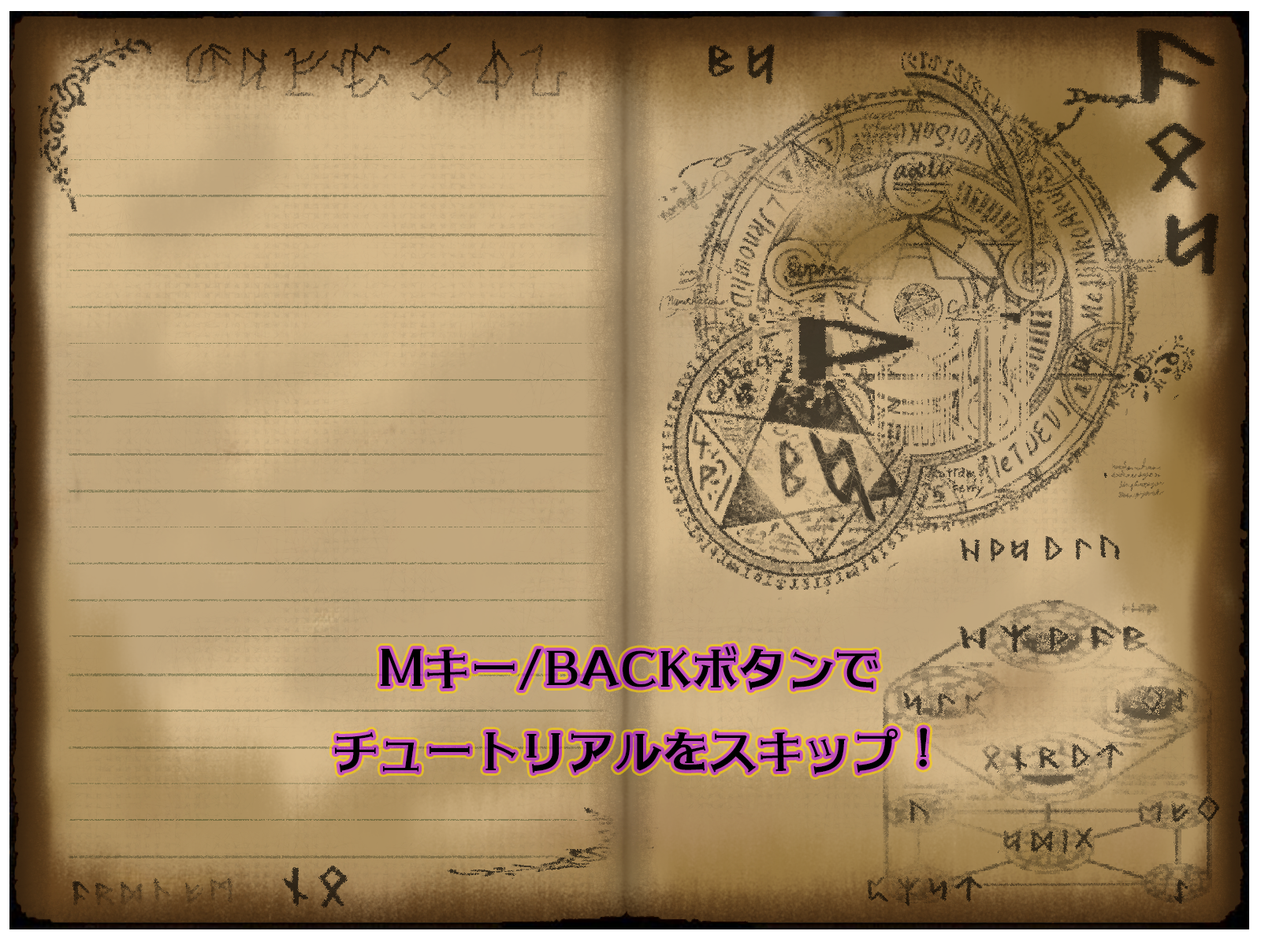
<style>
.page{position:relative;width:1261px;height:946px}
.page>*{position:absolute;margin:0}
.t1{font:47.3px "SicSelifGothicRE";color:#000000}
</style>
<div class="page">
<p class="t1" style="left:335px;top:645px;width:593px;height:129px">Mキー/BACKボタンで<br>チュートリアルをスキップ！</p>
</div>
